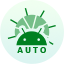
<style>
.page{position:relative;width:64px;height:64px}
.page>*{position:absolute;margin:0}
.t1{font:8px "Ubuntu-Bold";letter-spacing:0.28em;color:#008020}
</style>
<div class="page">
<p class="t1" style="left:17px;top:47px;width:29px;height:6px">AUTO</p>
</div>
